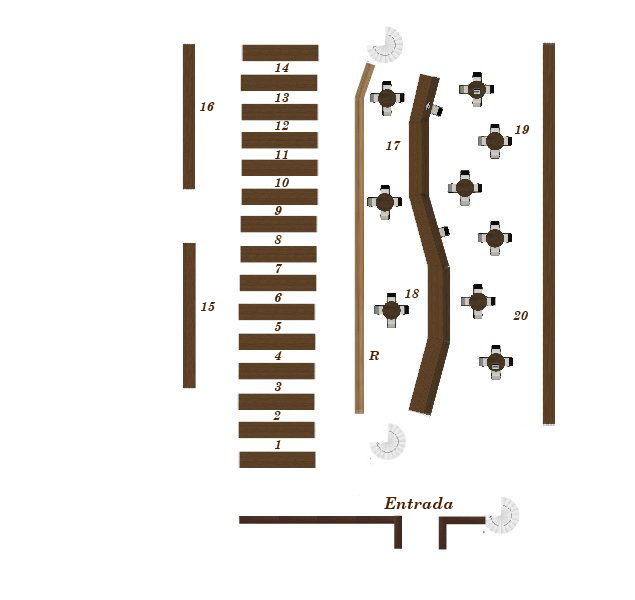
<style>
.page{position:relative;width:635px;height:600px;background:#ffffff}
.page>*{position:absolute;margin:0}
.t1{font:13.3px "CenturySchoolbook-BoldItalic";color:#4e2300}
.t2{font:16px "CenturySchoolbook-BoldItalic";color:#4e2300}
</style>
<div class="page">
<p class="t1" style="left:275px;top:63px;width:14px;height:9px">14</p>
<p class="t1" style="left:200px;top:102px;width:15px;height:9px">16</p>
<p class="t1" style="left:275px;top:93px;width:14px;height:9px">13</p>
<p class="t1" style="left:275px;top:121px;width:14px;height:9px">12</p>
<p class="t1" style="left:515px;top:125px;width:15px;height:9px">19</p>
<p class="t1" style="left:275px;top:150px;width:13px;height:9px">11</p>
<p class="t1" style="left:386px;top:141px;width:15px;height:9px">17</p>
<p class="t1" style="left:275px;top:178px;width:14px;height:9px">10</p>
<p class="t1" style="left:274px;top:206px;width:8px;height:9px">9</p>
<p class="t1" style="left:274px;top:235px;width:8px;height:9px">8</p>
<p class="t1" style="left:276px;top:264px;width:7px;height:9px">7</p>
<p class="t1" style="left:275px;top:293px;width:7px;height:9px">6</p>
<p class="t1" style="left:405px;top:289px;width:14px;height:9px">18</p>
<p class="t1" style="left:201px;top:302px;width:15px;height:9px">15</p>
<p class="t1" style="left:513px;top:311px;width:15px;height:9px">20</p>
<p class="t1" style="left:274px;top:322px;width:8px;height:9px">5</p>
<p class="t1" style="left:274px;top:351px;width:8px;height:9px">4</p>
<p class="t1" style="left:369px;top:351px;width:11px;height:9px">R</p>
<p class="t1" style="left:274px;top:382px;width:8px;height:9px">3</p>
<p class="t1" style="left:273px;top:411px;width:8px;height:9px">2</p>
<p class="t1" style="left:275px;top:440px;width:6px;height:9px">1</p>
<p class="t2" style="left:384px;top:497px;width:69px;height:12px">Entrada</p>
</div>
